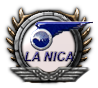
<style>
.page{position:relative;width:98px;height:88px;background:#ffffff}
.page>*{position:absolute;margin:0}
.t1{font:12.5px "Arial-BoldItalicMT"}
</style>
<div class="page">
<p class="t1" style="left:24px;top:52px;width:50px;height:9px">LA NICA</p>
</div>
